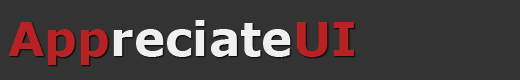
<style>
.page{position:relative;width:520px;height:80px;background:#333333}
.page>*{position:absolute;margin:0}
.t1{font:47px "Verdana-Bold";color:#f0f0f0}
.t2{font:47px "Verdana-Bold";color:#b72325}
</style>
<div class="page">
<p class="t1" style="left:8px;top:20px;width:346px;height:45px"><span class="t2">App</span>reciate<span class="t2">UI</span></p>
</div>
